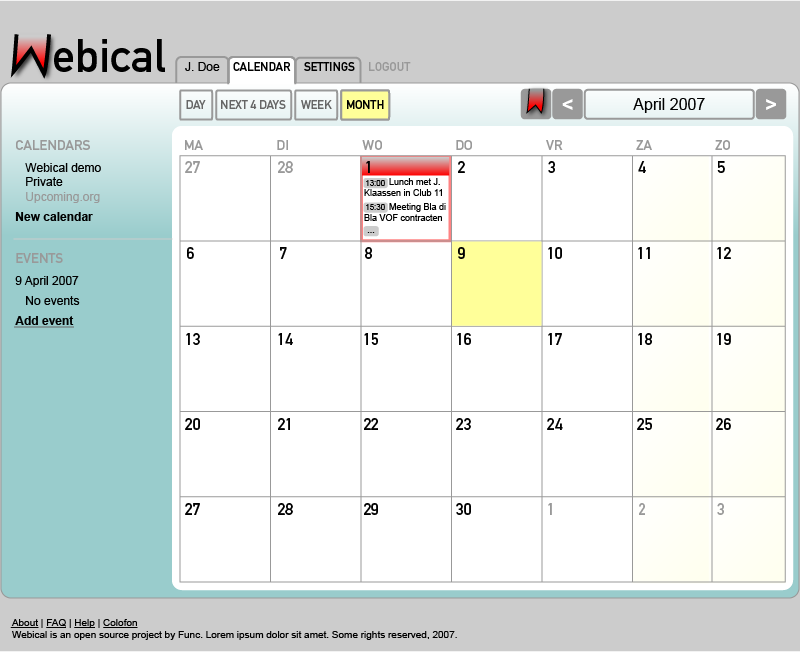
<style>
.page{position:relative;width:800px;height:652px;background:#ffffff}
.page>*{position:absolute;margin:0}
.t1{font:46.2px "DINMittelschrift";color:#000000}
.t2{font:12px "ArialMT";color:#000000}
.t3{font:12px "DINMittelschrift-Alternate";color:#000000}
.t4{font:12px "DINMittelschrift-Alternate";color:#999999}
.t5{font:12px "DINMittelschrift-Alternate";color:#666666}
.t6{font:20px "Arial-BoldMT";color:#ffffff}
.t7{font:16px "ArialMT";color:#000000}
.t8{font:12px/22px "ArialMT";color:#000000}
.t9{font:14px "DINMittelschrift-Alternate";color:#999999}
.t10{font:12px "ArialMT";color:#999999}
.t11{font:12px/20px "Arial-BoldMT";color:#000000}
.t12{font:16px "DINMittelschrift-Alternate";color:#999999}
.t13{font:16px "DINMittelschrift-Alternate";color:#000000}
.t14{font:9px "ArialMT";color:#000000}
.t15{font:8px "ArialMT";color:#000000}
.t16{font:12px/20px "ArialMT";color:#000000}
.t17{font:10px "ArialMT";color:#000000}
</style>
<div class="page">
<p class="t1" style="left:54px;top:39px;width:111px;height:33px">ebical</p>
<p class="t2" style="left:185px;top:62px;width:35px;height:9px">J. Doe</p>
<p class="t3" style="left:233px;top:62px;width:58px;height:9px">CALENDAR</p>
<p class="t3" style="left:304px;top:62px;width:51px;height:9px">SETTINGS</p>
<p class="t4" style="left:369px;top:62px;width:42px;height:9px">LOGOUT</p>
<p class="t5" style="left:186px;top:100px;width:20px;height:9px">DAY</p>
<p class="t5" style="left:221px;top:100px;width:65px;height:9px">NEXT 4 DAYS</p>
<p class="t5" style="left:301px;top:100px;width:31px;height:9px">WEEK</p>
<p class="t3" style="left:347px;top:100px;width:37px;height:9px">MONTH</p>
<p class="t3" style="left:347px;top:100px;width:37px;height:9px">MONTH</p>
<p class="t6" style="left:562px;top:99px;width:11px;height:11px">&lt;</p>
<p class="t7" style="left:633px;top:98px;width:72px;height:15px">April 2007</p>
<p class="t6" style="left:766px;top:99px;width:10px;height:11px">&gt;</p>
<p class="t8" style="left:15px;top:140px;width:86px;height:81px"><span class="t9">CALENDARS<br></span>   Webical demo<br><span class="t2">   Private<br></span><span class="t10">   Upcoming.org<br></span><span class="t11">New calendar</span></p>
<p class="t9" style="left:185px;top:140px;width:18px;height:10px">MA</p>
<p class="t9" style="left:277px;top:140px;width:11px;height:10px">DI</p>
<p class="t9" style="left:362px;top:140px;width:20px;height:10px">WO</p>
<p class="t9" style="left:456px;top:140px;width:16px;height:10px">DO</p>
<p class="t9" style="left:546px;top:140px;width:17px;height:10px">VR</p>
<p class="t9" style="left:636px;top:140px;width:16px;height:10px">ZA</p>
<p class="t9" style="left:715px;top:140px;width:15px;height:10px">ZO</p>
<p class="t12" style="left:185px;top:161px;width:15px;height:12px">27</p>
<p class="t12" style="left:278px;top:161px;width:15px;height:12px">28</p>
<p class="t13" style="left:366px;top:161px;width:4px;height:12px">1</p>
<p class="t13" style="left:458px;top:161px;width:7px;height:12px">2</p>
<p class="t13" style="left:548px;top:161px;width:7px;height:12px">3</p>
<p class="t13" style="left:638px;top:161px;width:8px;height:12px">4</p>
<p class="t13" style="left:717px;top:161px;width:8px;height:12px">5</p>
<p class="t14" style="left:364px;top:178px;width:78px;height:18px">Lunch met J. Klaassen in Club 11</p>
<p class="t15" style="left:366px;top:180px;width:19px;height:6px">13:00</p>
<p class="t14" style="left:364px;top:203px;width:82px;height:18px">Meeting Bla di Bla VOF contracten</p>
<p class="t15" style="left:366px;top:204px;width:19px;height:6px">15:30</p>
<p class="t14" style="left:367px;top:232px;width:8px;height:1px">...</p>
<p class="t8" style="left:15px;top:253px;width:65px;height:72px"><span class="t9">EVENTS<br></span>9 April 2007<br><span class="t16">   No events<br></span><span class="t11">Add event</span></p>
<p class="t13" style="left:187px;top:247px;width:7px;height:12px">6</p>
<p class="t13" style="left:280px;top:247px;width:7px;height:12px">7</p>
<p class="t13" style="left:365px;top:247px;width:7px;height:12px">8</p>
<p class="t13" style="left:458px;top:247px;width:7px;height:12px">9</p>
<p class="t13" style="left:548px;top:247px;width:14px;height:12px">10</p>
<p class="t13" style="left:638px;top:247px;width:12px;height:12px">11</p>
<p class="t13" style="left:717px;top:247px;width:14px;height:12px">12</p>
<p class="t13" style="left:186px;top:333px;width:14px;height:12px">13</p>
<p class="t13" style="left:278px;top:333px;width:15px;height:12px">14</p>
<p class="t13" style="left:364px;top:333px;width:14px;height:12px">15</p>
<p class="t13" style="left:457px;top:333px;width:14px;height:12px">16</p>
<p class="t13" style="left:548px;top:333px;width:14px;height:12px">17</p>
<p class="t13" style="left:638px;top:333px;width:14px;height:12px">18</p>
<p class="t13" style="left:717px;top:333px;width:14px;height:12px">19</p>
<p class="t13" style="left:185px;top:418px;width:15px;height:12px">20</p>
<p class="t13" style="left:278px;top:418px;width:12px;height:12px">21</p>
<p class="t13" style="left:364px;top:418px;width:14px;height:12px">22</p>
<p class="t13" style="left:456px;top:418px;width:15px;height:12px">23</p>
<p class="t13" style="left:547px;top:418px;width:16px;height:12px">24</p>
<p class="t13" style="left:637px;top:418px;width:15px;height:12px">25</p>
<p class="t13" style="left:716px;top:418px;width:15px;height:12px">26</p>
<p class="t13" style="left:185px;top:503px;width:15px;height:12px">27</p>
<p class="t13" style="left:278px;top:503px;width:15px;height:12px">28</p>
<p class="t13" style="left:364px;top:503px;width:14px;height:12px">29</p>
<p class="t13" style="left:456px;top:503px;width:15px;height:12px">30</p>
<p class="t12" style="left:548px;top:503px;width:4px;height:12px">1</p>
<p class="t12" style="left:639px;top:503px;width:6px;height:12px">2</p>
<p class="t12" style="left:717px;top:503px;width:7px;height:12px">3</p>
<p class="t17" style="left:11px;top:619px;width:446px;height:21px">About | FAQ | Help | Colofon<br>Webical is an open source project by Func. Lorem ipsum dolor sit amet. Some rights reserved, 2007.</p>
</div>
